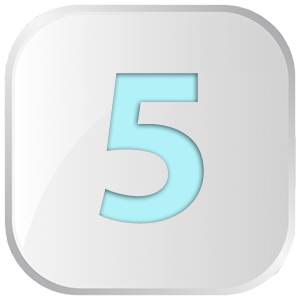
<style>
.page{position:relative;width:300px;height:300px}
.page>*{position:absolute;margin:0}
.t1{font:226.7px "MyriadPro-Bold";letter-spacing:0.05em;color:#b1f1f7}
</style>
<div class="page">
<p class="t1" style="left:99px;top:73px;width:105px;height:151px">5</p>
</div>
